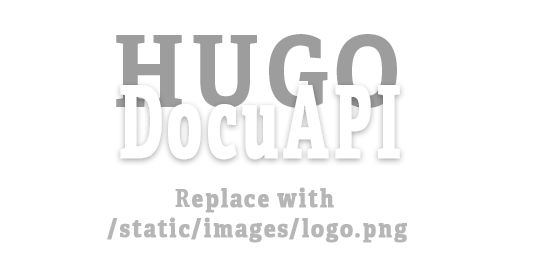
<style>
.page{position:relative;width:540px;height:264px;background:#ffffff}
.page>*{position:absolute;margin:0}
.t1{font:100px "AdelleCondensed-Bold";letter-spacing:0.06em;color:#9d9d9d;text-transform:uppercase}
.t2{font:100px "AdelleCondensed-Bold";letter-spacing:0.06em;color:#ffffff;font-weight:bold;scale:0.66 1}
.t3{font:100px "AdelleCondensed-Bold";letter-spacing:0.06em;color:#ffffff;text-transform:uppercase;font-weight:bold;scale:0.66 1}
.t4{font:25px "AdelleCondensed-Bold";letter-spacing:0.06em;color:#b7b6b6;font-weight:bold}
.t5{font:25px "AdelleCondensed-Bold";letter-spacing:0.06em;color:#b7b6b6;text-transform:uppercase}
</style>
<div class="page">
<p class="t1" style="left:116px;top:34px;width:281px;height:74px">HugO</p>
<p class="t2" style="left:120px;top:85px;width:280px;height:75px"><span class="t3">D</span>ocuAPI</p>
<p class="t4" style="left:107px;top:187px;width:300px;height:56px;text-align:center"><span class="t5">R</span>eplace with <br>/static/images/logo.png</p>
</div>
